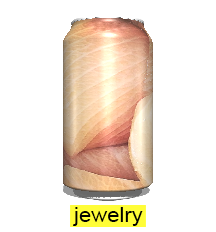
<style>
.page{position:relative;width:216px;height:232px;background:#ffffff}
.page>*{position:absolute;margin:0}
.t1{font:20px "ArialMT";color:#000000;scale:1.11 1}
</style>
<div class="page">
<p class="t1" style="left:73px;top:207px;width:70px;height:19px">jewelry</p>
</div>
